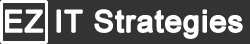
<style>
.page{position:relative;width:250px;height:44px;background:#333333}
.page>*{position:absolute;margin:0}
.t1{font:30px "ArialMT";letter-spacing:0.025em;color:#fefefe;font-weight:bold}
</style>
<div class="page">
<p class="t1" style="left:5px;top:9px;width:238px;height:30px">EZ IT Strategies</p>
</div>
